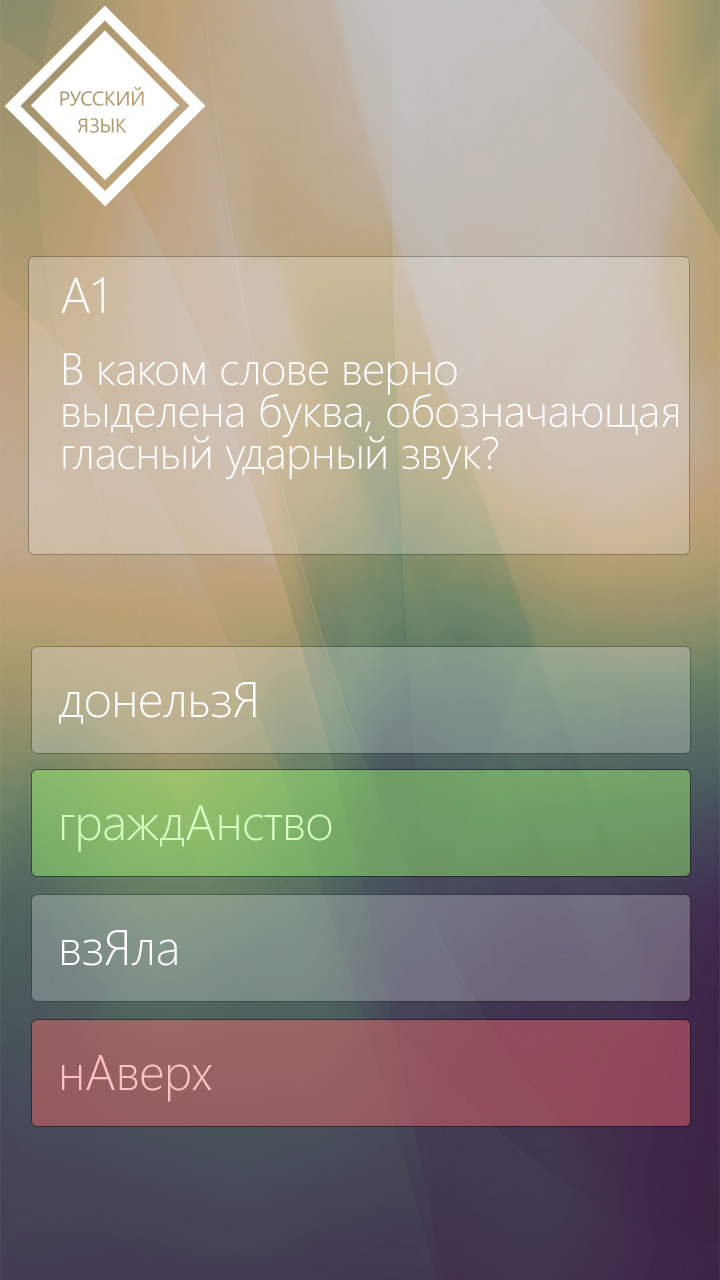
<style>
.page{position:relative;width:720px;height:1280px}
.page>*{position:absolute;margin:0}
.t1{font:45px/40px "SegoeUI-Light";letter-spacing:-0.01em;color:#ffffff}
.t2{font:50px/40px "SegoeUI-Light";letter-spacing:-0.01em;color:#ffffff}
.t3{font:50px/70px "SegoeUI-Light";letter-spacing:-0.01em;color:#ffffff}
.t4{font:45px/70px "SegoeUI-Light";letter-spacing:-0.01em;color:#ffffff}
.t5{font:50px "SegoeUI-Light";letter-spacing:-0.01em;color:#ffffff}
.t6{font:50px "SegoeUI-Light";letter-spacing:-0.01em;color:#d8ffc2}
.t7{font:50px "SegoeUI-Light";letter-spacing:-0.01em;color:#ffc2c2}
</style>
<div class="page">
<p class="t1" style="left:61px;top:277px;width:617px;height:203px"><span class="t2">А</span><span class="t3">1<br></span><span class="t4">В </span>каком слове верно<br>выделена буква, обозначающая<br>гласный ударный звук?</p>
<p class="t5" style="left:59px;top:682px;width:197px;height:42px">донельзЯ</p>
<p class="t6" style="left:62px;top:805px;width:270px;height:47px">граждАнство</p>
<p class="t5" style="left:62px;top:930px;width:115px;height:36px">взЯла</p>
<p class="t7" style="left:62px;top:1055px;width:150px;height:47px">нАверх</p>
</div>
